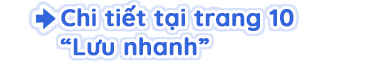
<style>
.page{position:relative;width:384px;height:69px;background:#ffffff}
.page>*{position:absolute;margin:0}
.t1{font:24px "Quicksand-Bold";color:#3264dc;font-weight:bold}
</style>
<div class="page">
<p class="t1" style="left:60px;top:5px;width:234px;height:51px">Chi tiết tại trang 10 <br>“Lưu nhanh”</p>
</div>
